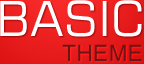
<style>
.page{position:relative;width:144px;height:64px}
.page>*{position:absolute;margin:0}
.t1{font:48px "Square721BT-Roman";letter-spacing:0.01em;color:#ffffff}
.t2{font:36px "Kartika";letter-spacing:0.01em;color:#6f1414}
</style>
<div class="page">
<p class="t1" style="left:0px;top:0px;width:142px;height:37px">BASIC</p>
<p class="t2" style="left:62px;top:44px;width:80px;height:17px">THEME</p>
</div>
